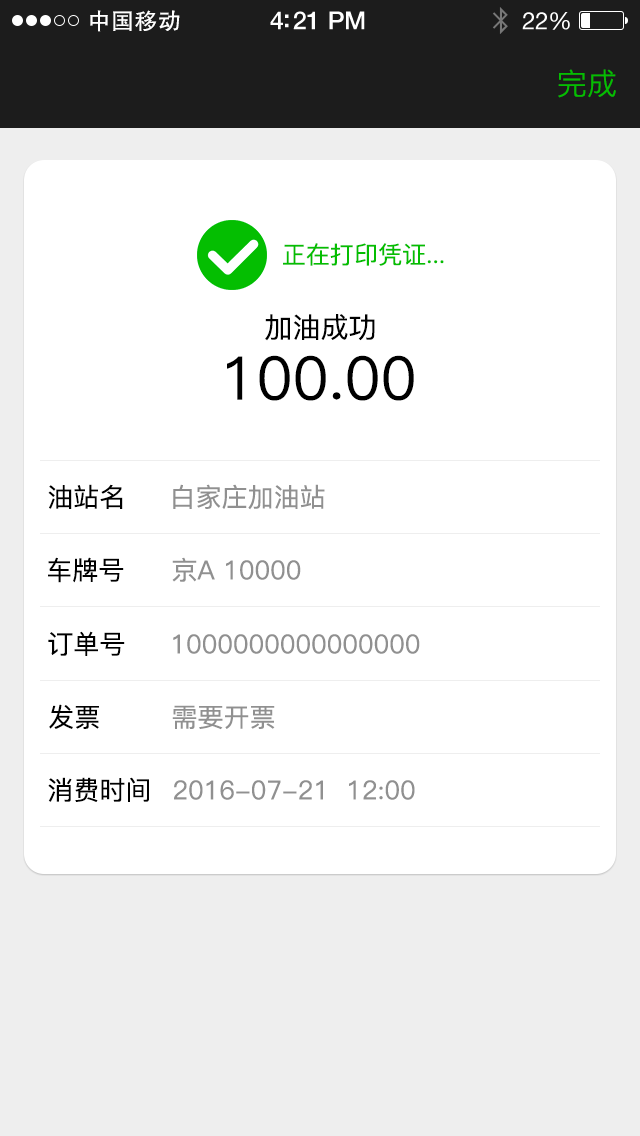
<style>
.page{position:relative;width:640px;height:1136px;background:#ffffff}
.page>*{position:absolute;margin:0}
.t1{font:23px "FZHTK--GBK1-0";letter-spacing:0.02em;color:#ffffff}
.t2{font:25px "HelveticaNeue-Medium";letter-spacing:-0.02em;color:#ffffff}
.t3{font:24px "HelveticaNeue";letter-spacing:-0.02em;color:#ffffff}
.t4{font:30px "PingFang-SC-Regular";color:#04be01}
.t5{font:24px "PingFang-SC-Medium";color:#04be01}
.t6{font:28px "PingFang-SC-Medium";color:#000000}
.t7{font:60px "PingFang-SC-Medium";color:#000000}
.t8{font:26px "PingFang-SC-Medium";color:#000000}
.t9{font:26px "PingFang-SC-Medium";color:#909090}
</style>
<div class="page">
<p class="t1" style="left:90px;top:10px;width:90px;height:22px">中国移动</p>
<p class="t2" style="left:270px;top:11px;width:95px;height:19px">4:21 PM</p>
<p class="t3" style="left:522px;top:12px;width:48px;height:18px">22%</p>
<p class="t4" style="left:558px;top:69px;width:58px;height:29px">完成</p>
<p class="t5" style="left:283px;top:243px;width:161px;height:23px">正在打印凭证...</p>
<p class="t6" style="left:265px;top:314px;width:110px;height:27px">加油成功</p>
<p class="t7" style="left:227px;top:355px;width:187px;height:46px">100.00</p>
<p class="t8" style="left:48px;top:484px;width:75px;height:25px">油站名</p>
<p class="t9" style="left:173px;top:484px;width:152px;height:26px">白家庄加油站</p>
<p class="t8" style="left:48px;top:557px;width:76px;height:26px">车牌号</p>
<p class="t9" style="left:172px;top:557px;width:129px;height:25px">京A 10000</p>
<p class="t8" style="left:48px;top:631px;width:77px;height:25px">订单号</p>
<p class="t9" style="left:173px;top:634px;width:247px;height:20px">1000000000000000</p>
<p class="t8" style="left:49px;top:704px;width:50px;height:25px">发票</p>
<p class="t9" style="left:172px;top:705px;width:103px;height:25px">需要开票</p>
<p class="t8" style="left:48px;top:777px;width:101px;height:25px">消费时间</p>
<p class="t9" style="left:174px;top:780px;width:241px;height:20px">2016-07-21  12:00</p>
</div>
